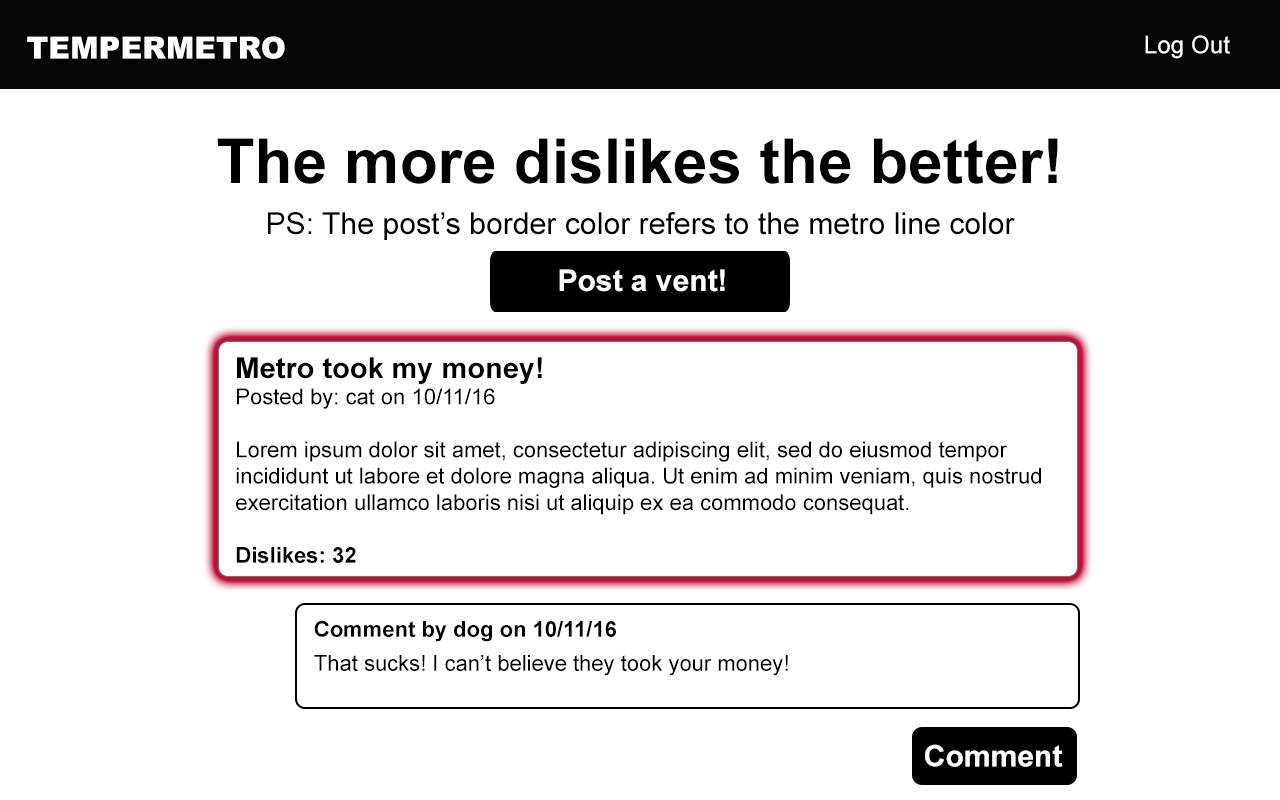
<style>
.page{position:relative;width:1280px;height:800px;background:#ffffff}
.page>*{position:absolute;margin:0}
.t1{font:30.2px "Arial-Black";color:#ffffff}
.t2{font:24.2px "ArialMT";color:#ffffff}
.t3{font:62.2px "Arial-BoldMT";color:#000000}
.t4{font:30.2px "ArialMT";color:#000000}
.t5{font:30px "Arial-BoldMT";color:#ffffff}
.t6{font:22px "ArialMT";color:#000000}
.t7{font:29px "Arial-BoldMT";color:#000000}
.t8{font:22px "Arial-BoldMT";color:#000000}
.t9{font:22px/17px "ArialMT";color:#000000}
.t10{font:22px/17px "Arial-BoldMT";color:#000000}
</style>
<div class="page">
<p class="t1" style="left:27px;top:36px;width:258px;height:23px">TEMPERMETRO</p>
<p class="t2" style="left:1145px;top:35px;width:85px;height:24px">Log Out</p>
<p class="t3" style="left:217px;top:138px;width:841px;height:46px">The more dislikes the better!</p>
<p class="t4" style="left:268px;top:212px;width:747px;height:28px">PS: The post’s border color refers to the metro line color</p>
<p class="t5" style="left:559px;top:269px;width:166px;height:23px">Post a vent!</p>
<p class="t6" style="left:236px;top:357px;width:805px;height:206px"><span class="t7">Metro took my money!<br></span>Posted by: cat on 10/11/16 <br><br>Lorem ipsum dolor sit amet, consectetur adipiscing elit, sed do eiusmod tempor incididunt ut labore et dolore magna aliqua. Ut enim ad minim veniam, quis nostrud exercitation ullamco laboris nisi ut aliquip ex ea commodo consequat. <br><br><span class="t8">Dislikes: 32</span></p>
<p class="t9" style="left:314px;top:620px;width:474px;height:56px"><span class="t10">Comment by dog on 10/11/16<br></span><br>That sucks! I can’t believe they took your money!</p>
<p class="t5" style="left:925px;top:744px;width:138px;height:23px">Comment</p>
</div>
